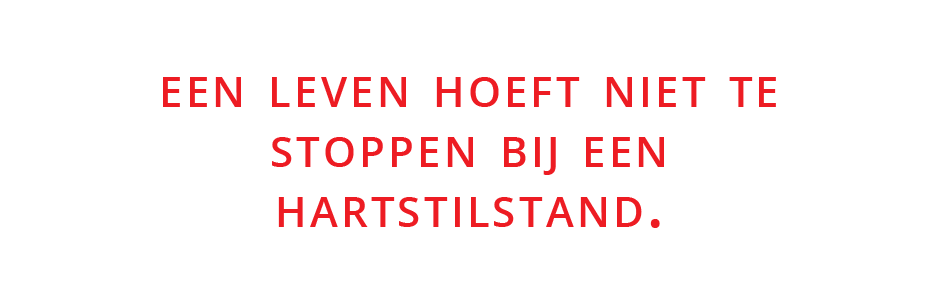
<style>
.page{position:relative;width:940px;height:300px;background:#ffffff}
.page>*{position:absolute;margin:0}
.t1{font:60px/60px "OpenSans-Semibold";letter-spacing:0.075em;color:#ed1c23;font-variant:small-caps}
</style>
<div class="page">
<p class="t1" style="left:163px;top:77px;width:613px;height:151px;text-align:center">een leven hoeft niet te<br>stoppen bij een<br>hartstilstand.</p>
</div>
